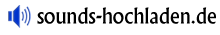
<style>
.page{position:relative;width:220px;height:35px;background:#ffffff}
.page>*{position:absolute;margin:0}
.t1{font:23.4px "Narkisim";color:#000000;scale:0.96 1}
</style>
<div class="page">
<p class="t1" style="left:37px;top:7px;width:179px;height:17px">sounds-hochladen.de</p>
</div>
